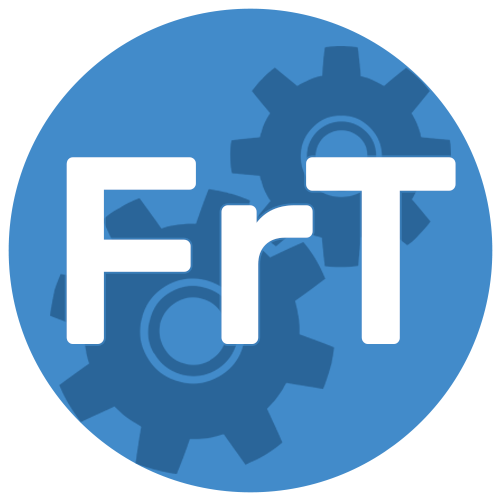
<style>
.page{position:relative;width:500px;height:500px;background:#428bca}
.page>*{position:absolute;margin:0}
.t1{font:266.7px "Rubik-Medium";color:#ffffff}
</style>
<div class="page">
<p class="t1" style="left:66px;top:157px;width:390px;height:187px">FrT</p>
</div>
